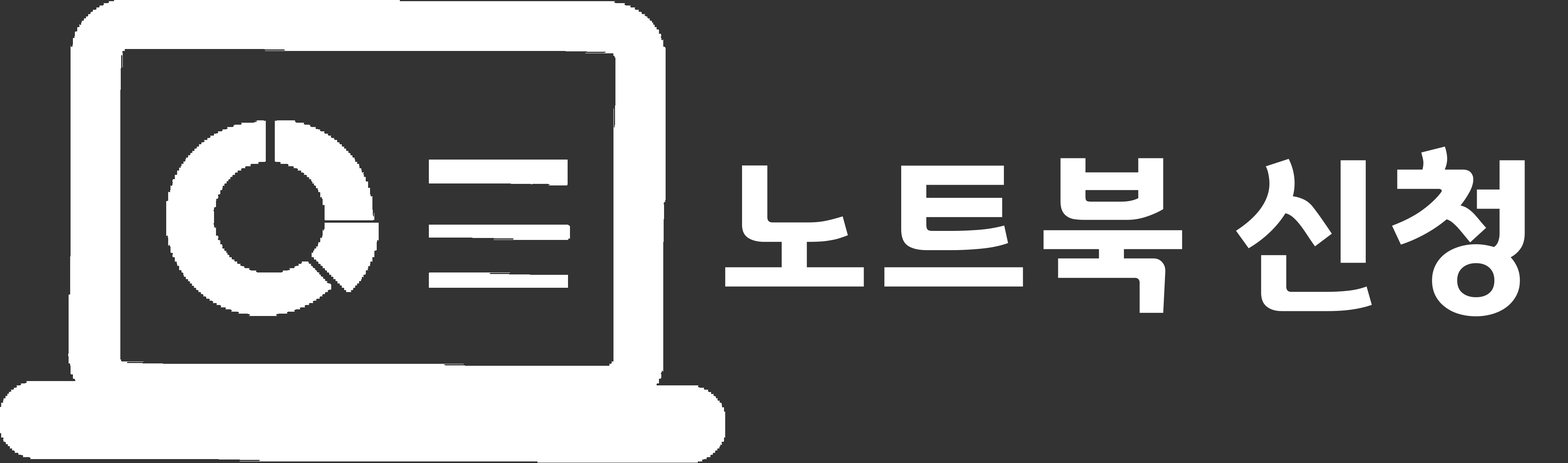
<style>
.page{position:relative;width:1568px;height:463px;background:#333333}
.page>*{position:absolute;margin:0}
.t1{font:173.1px "GyeonggiTitleV";letter-spacing:-0.08em;color:#ffffff}
</style>
<div class="page">
<p class="t1" style="left:725px;top:146px;width:800px;height:170px">노트북 신청</p>
</div>
